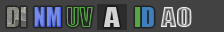
<style>
.page{position:relative;width:224px;height:32px;background:#424242}
.page>*{position:absolute;margin:0}
.t1{font:25px "Impact"}
.t2{font:25px "Impact";color:#7a7af3;scale:0.9 1}
.t3{font:25px "Impact";color:#d2d2d2;scale:1.23 1}
.t4{font:25px "Impact";scale:1.21 1}
</style>
<div class="page">
<p class="t1" style="left:8px;top:7px;width:146px;height:20px">DI NM         A    ID</p>
<p class="t2" style="left:34px;top:7px;width:27px;height:20px">NM</p>
<p class="t3" style="left:103px;top:7px;width:17px;height:20px">A</p>
<p class="t4" style="left:160px;top:7px;width:32px;height:20px">AO</p>
</div>
